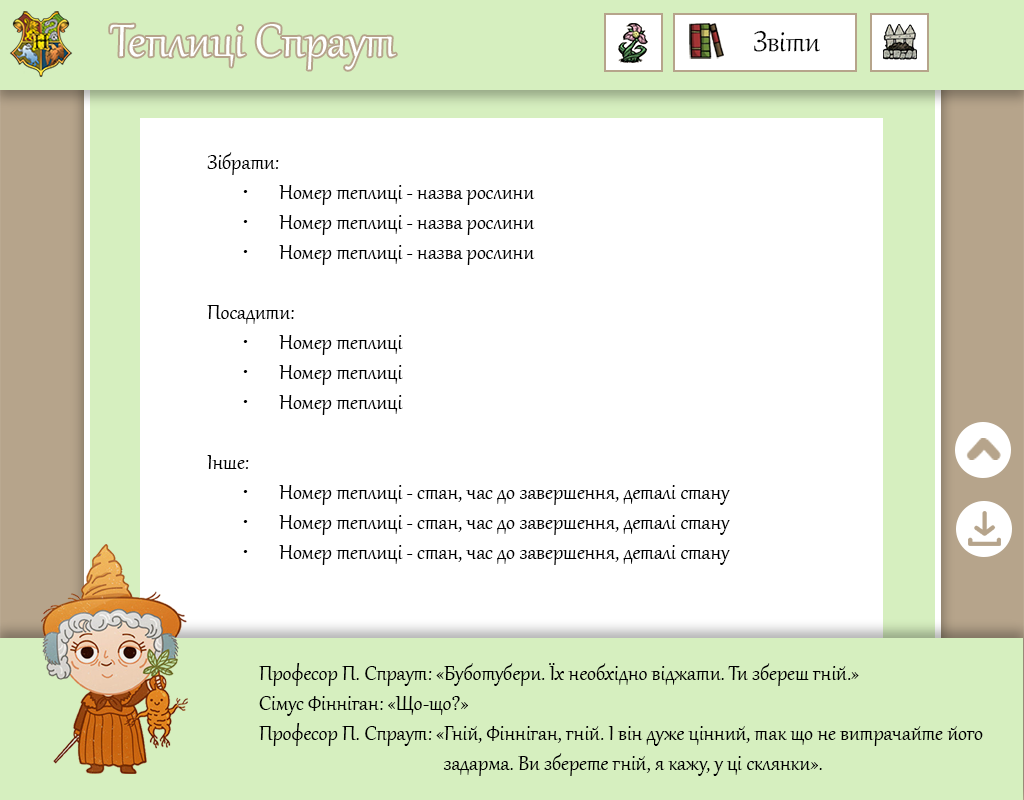
<style>
.page{position:relative;width:1024px;height:800px;background:#ffffff}
.page>*{position:absolute;margin:0}
.t1{font:55.8px "Gabriola";color:#ffffff}
.t2{font:34.9px "Gabriola";color:#000000}
.t3{font:25px "Gabriola";color:#000000}
</style>
<div class="page">
<p class="t1" style="left:110px;top:24px;width:286px;height:46px">Теплиці Спраут</p>
<p class="t2" style="left:754px;top:30px;width:66px;height:22px">Звіти</p>
<p class="t3" style="left:207px;top:152px;width:523px;height:413px">Зібрати:<br> • Номер теплиці - назва рослини<br> • Номер теплиці - назва рослини<br> • Номер теплиці - назва рослини<br><br>Посадити:<br> • Номер теплиці<br> • Номер теплиці<br> • Номер теплиці<br><br>Інше:<br> • Номер теплиці - стан, час до завершення, деталі стану<br> • Номер теплиці - стан, час до завершення, деталі стану<br> • Номер теплиці - стан, час до завершення, деталі стану</p>
<p class="t3" style="left:259px;top:663px;width:724px;height:113px">Професор П. Спраут: «Буботубери. Їх необхідно віджати. Ти збереш гній.»<br>Сімус Фінніган: «Що-що?»<br>Професор П. Спраут: «Гній, Фінніган, гній. І він дуже цінний, так що не витрачайте його<br>      задарма. Ви зберете гній, я кажу, у ці склянки».</p>
</div>
